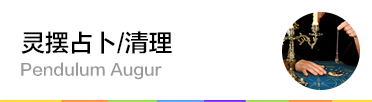
<style>
.page{position:relative;width:372px;height:102px;background:#ffffff}
.page>*{position:absolute;margin:0}
.t1{font:24px "FZLTZHK--GBK1-0";color:#000000}
.t2{font:16px "FZLTZHK--GBK1-0";color:#999999}
</style>
<div class="page">
<p class="t1" style="left:21px;top:31px;width:151px;height:23px">灵摆占卜/清理</p>
<p class="t2" style="left:21px;top:62px;width:141px;height:18px">Pendulum Augur</p>
</div>
